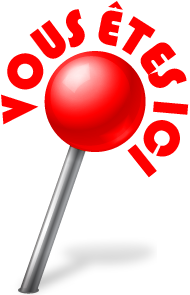
<style>
.page{position:relative;width:190px;height:295px;background:#ffffff}
.page>*{position:absolute;margin:0}
.t1{font:51.6px "Bauhaus93";letter-spacing:-0.08em;color:#ff0000}
</style>
<div class="page">
<p class="t1" style="left:1px;top:1px;width:188px;height:177px;rotate:-50deg">VOUS ÊTES ICI</p>
</div>
